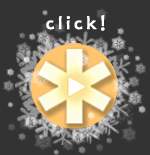
<style>
.page{position:relative;width:150px;height:155px;background:#333333}
.page>*{position:absolute;margin:0}
.t1{font:19.7px "HaanSaleM";letter-spacing:0.1em;color:#ffffff;font-weight:bold}
</style>
<div class="page">
<p class="t1" style="left:46px;top:15px;width:59px;height:16px">click!</p>
</div>
